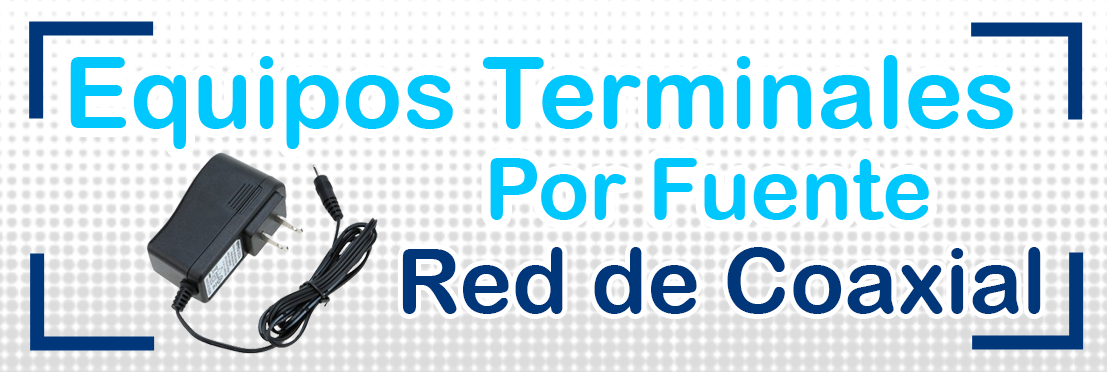
<style>
.page{position:relative;width:1107px;height:372px;background:#ffffff}
.page>*{position:absolute;margin:0}
.t1{font:100px "ArialRoundedMTBold";color:#00c8ff}
.t2{font:85px "ArialRoundedMTBold";color:#00c8ff}
.t3{font:90px "ArialRoundedMTBold";color:#00377b}
</style>
<div class="page">
<p class="t1" style="left:70px;top:55px;width:943px;height:94px">Equipos Terminales</p>
<p class="t2" style="left:490px;top:158px;width:439px;height:62px">Por Fuente</p>
<p class="t3" style="left:402px;top:247px;width:639px;height:67px">Red de Coaxial</p>
</div>
